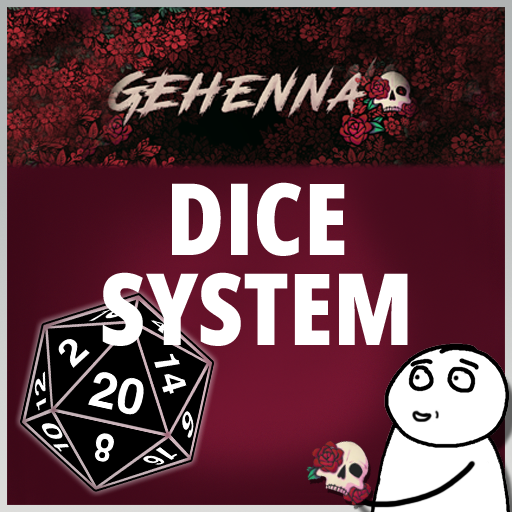
<style>
.page{position:relative;width:512px;height:512px}
.page>*{position:absolute;margin:0}
.t1{font:99.7px/90.3px "OpenSansRoman-CondensedExtraBold";color:#ffffff}
</style>
<div class="page">
<p class="t1" style="left:102px;top:182px;width:306px;height:164px;text-align:center">DICE<br>SYSTEM</p>
</div>
